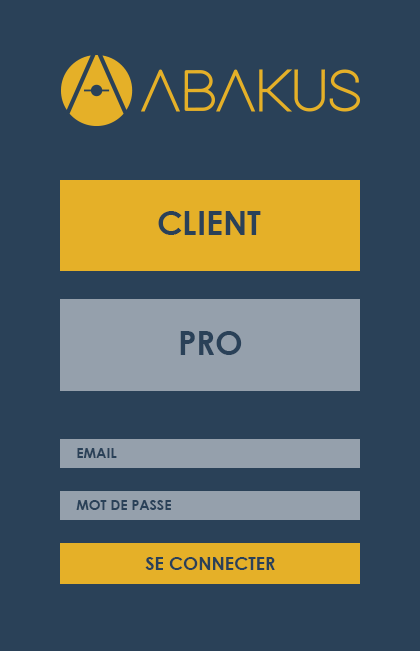
<style>
.page{position:relative;width:420px;height:651px;background:#2a4158}
.page>*{position:absolute;margin:0}
.t1{font:32.7px "CenturyGothic-Bold";color:#2a4158;text-transform:uppercase}
.t2{font:14px "CenturyGothic-Bold";color:#2a4158;text-transform:uppercase}
.t3{font:18px "CenturyGothic-Bold";color:#2a4158;text-transform:uppercase}
</style>
<div class="page">
<p class="t1" style="left:158px;top:211px;width:103px;height:24px">Client</p>
<p class="t1" style="left:180px;top:331px;width:62px;height:24px">Pro</p>
<p class="t2" style="left:77px;top:448px;width:40px;height:10px">Email</p>
<p class="t2" style="left:76px;top:500px;width:95px;height:10px">Mot de passe</p>
<p class="t3" style="left:145px;top:557px;width:130px;height:13px">Se Connecter</p>
</div>
